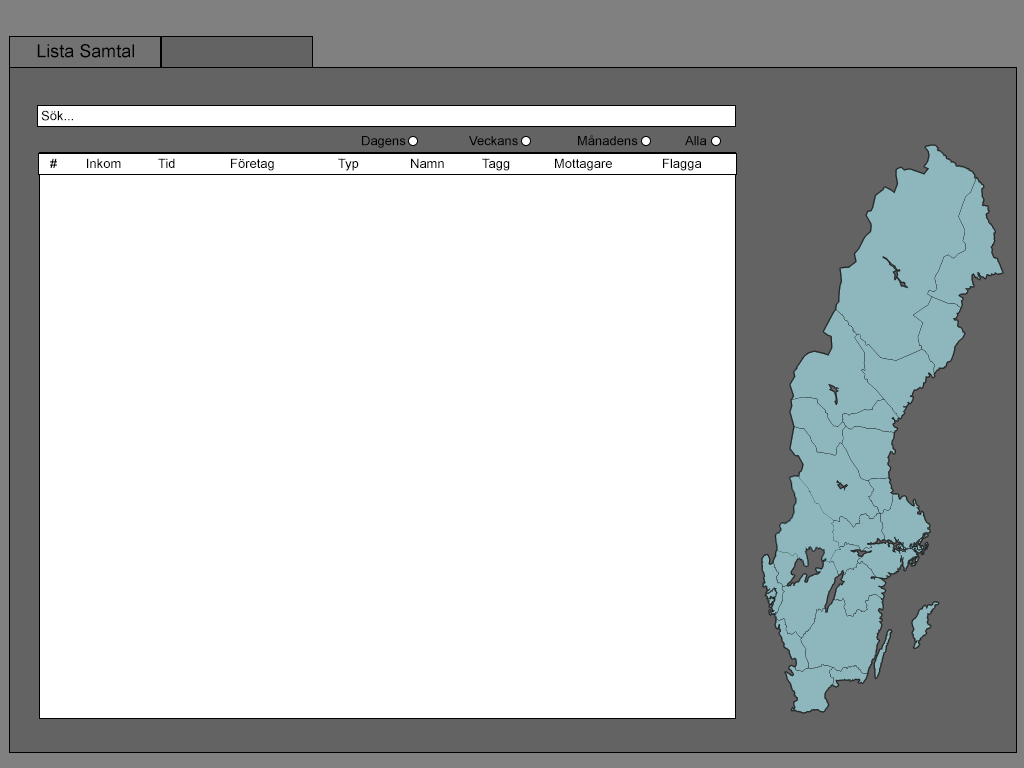
<style>
.page{position:relative;width:1024px;height:768px;background:#ffffff}
.page>*{position:absolute;margin:0}
.t1{font:18px "ArialMT";color:#000000}
.t2{font:13px "ArialMT";color:#000000}
</style>
<div class="page">
<p class="t1" style="left:37px;top:44px;width:97px;height:14px">Lista Samtal</p>
<p class="t2" style="left:41px;top:110px;width:32px;height:11px">Sök...</p>
<p class="t2" style="left:362px;top:135px;width:345px;height:13px">Dagens  Veckans  Månadens  Alla</p>
<p class="t2" style="left:50px;top:158px;width:652px;height:13px"># Inkom  Tid  Företag  Typ  Namn  Tagg  Mottagare  Flagga</p>
</div>
